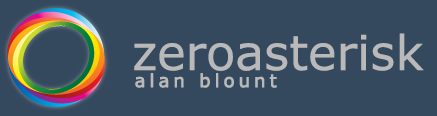
<style>
.page{position:relative;width:437px;height:116px;background:#34495e}
.page>*{position:absolute;margin:0}
.t1{font:48px "Verdana";color:#b9b9b9}
.t2{font:18px "Verdana";letter-spacing:0.2em;color:#b9b9b9;font-weight:bold}
</style>
<div class="page">
<p class="t1" style="left:134px;top:33px;width:290px;height:38px">zeroasterisk</p>
<p class="t2" style="left:135px;top:73px;width:142px;height:15px">alan blount</p>
</div>
